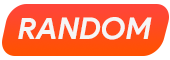
<style>
.page{position:relative;width:170px;height:60px}
.page>*{position:absolute;margin:0}
.t1{font:30px "ProductSans-BoldItalic";color:#f5f5f5}
</style>
<div class="page">
<p class="t1" style="left:18px;top:17px;width:134px;height:23px">RANDOM</p>
</div>
